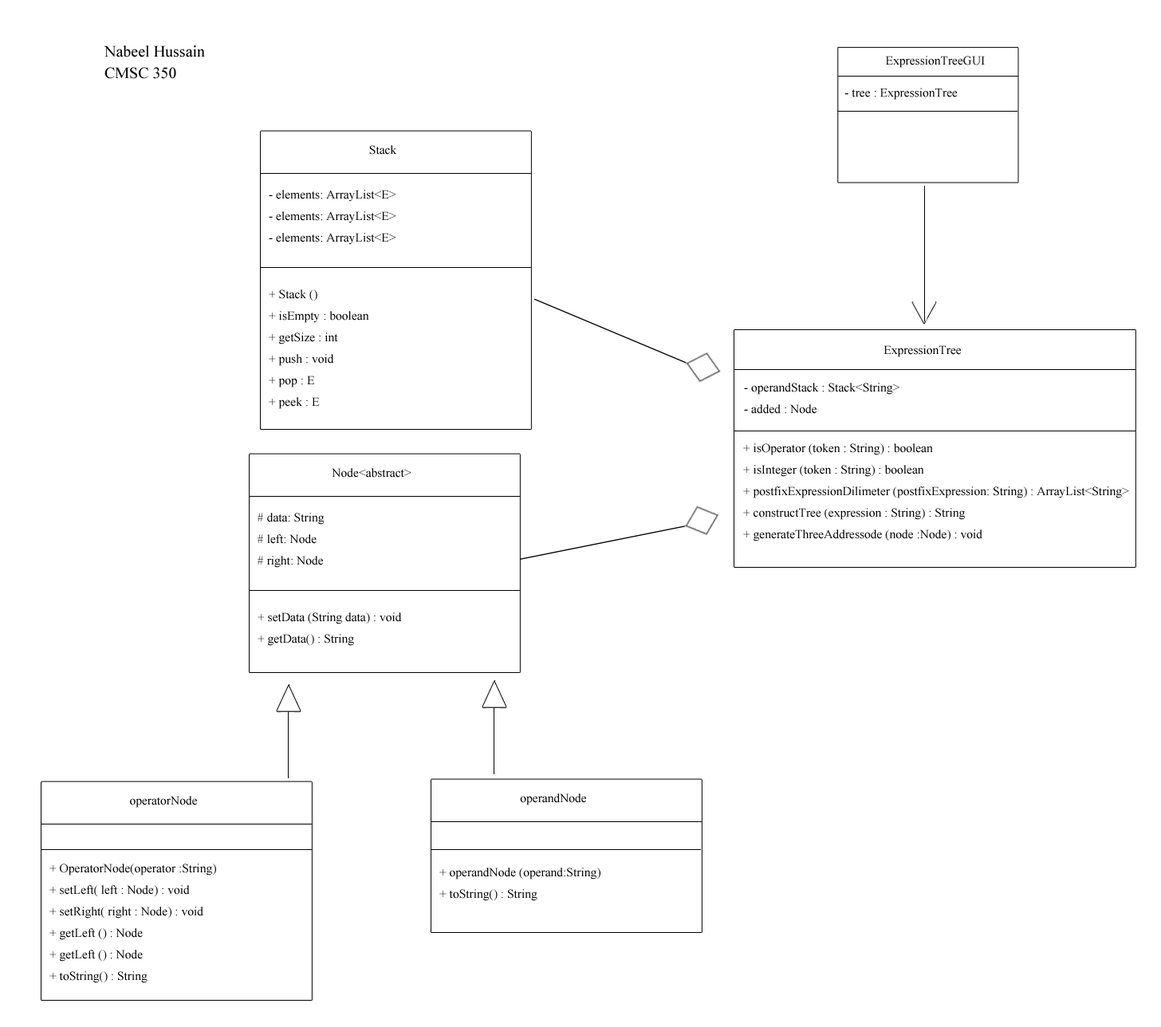
<style>
.page{position:relative;width:1161px;height:1027px;background:#ffffff}
.page>*{position:absolute;margin:0}
.t1{font:15.9px/21.5px "TimesNewRomanPSMT";color:#000000}
.t2{font:12.4px "TimesNewRomanPSMT";color:#000000}
.t3{font:12.4px/21.5px "TimesNewRomanPSMT";color:#000000}
</style>
<div class="page">
<p class="t1" style="left:104px;top:45px;width:101px;height:34px">Nabeel Hussain<br>CMSC 350</p>
<p class="t2" style="left:885px;top:56px;width:100px;height:12px">ExpressionTreeGUI</p>
<p class="t2" style="left:844px;top:88px;width:114px;height:12px">- tree : ExpressionTree</p>
<p class="t2" style="left:369px;top:145px;width:28px;height:10px">Stack</p>
<p class="t3" style="left:269px;top:190px;width:127px;height:55px">- elements: ArrayList&lt;E&gt;<br>- elements: ArrayList&lt;E&gt;<br>- elements: ArrayList&lt;E&gt;</p>
<p class="t3" style="left:269px;top:289px;width:100px;height:120px">+ Stack ()<br>+ isEmpty : boolean<br>+ getSize : int<br>+ push : void<br>+ pop : E<br>+ peek : E</p>
<p class="t2" style="left:884px;top:345px;width:77px;height:12px">ExpressionTree</p>
<p class="t3" style="left:744px;top:383px;width:155px;height:31px">- operandStack : Stack&lt;String&gt;<br>- added : Node</p>
<p class="t3" style="left:743px;top:443px;width:386px;height:98px">+ isOperator (token : String) : boolean<br>+ isInteger (token : String) : boolean<br>+ postfixExpressionDilimeter (postfixExpression: String) : ArrayList&lt;String&gt;<br>+ constructTree (expression : String) : String<br>+ generateThreeAddressode (node :Node) : void</p>
<p class="t2" style="left:332px;top:468px;width:79px;height:10px">Node&lt;abstract&gt;</p>
<p class="t3" style="left:258px;top:513px;width:67px;height:55px"># data: String<br># left: Node<br># right: Node</p>
<p class="t3" style="left:258px;top:612px;width:144px;height:34px">+ setData (String data) : void<br>+ getData() : String</p>
<p class="t2" style="left:130px;top:796px;width:67px;height:12px">operatorNode</p>
<p class="t2" style="left:520px;top:793px;width:66px;height:12px">operandNode</p>
<p class="t3" style="left:49px;top:864px;width:167px;height:119px">+ OperatorNode(operator :String)<br>+ setLeft( left : Node) : void<br>+ setRight( right : Node) : void<br>+ getLeft () : Node<br>+ getLeft () : Node<br>+ toString() : String</p>
<p class="t3" style="left:439px;top:868px;width:161px;height:33px">+ operandNode (operand:String) <br>+ toString() : String</p>
</div>
